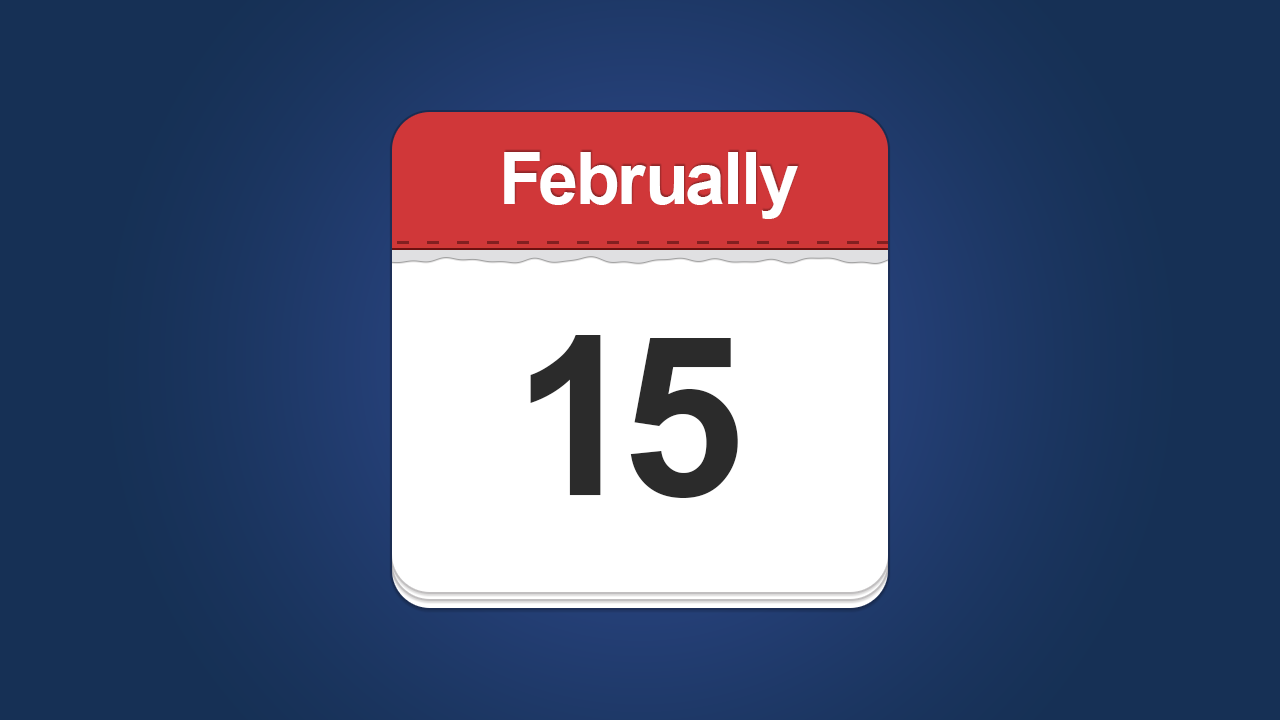
<style>
.page{position:relative;width:1280px;height:720px;background:#163055}
.page>*{position:absolute;margin:0}
.t1{font:72px "Arial-BoldMT";letter-spacing:-0.01em;color:#ffffff}
.t2{font:72px "Arial-BoldMT";letter-spacing:-0.03em;color:#ffffff}
.t3{font:72px "Arial-BoldMT";letter-spacing:0.01em;color:#ffffff}
.t4{font:222px "Arial-BoldMT";color:#2b2b2b}
</style>
<div class="page">
<p class="t1" style="left:504px;top:152px;width:294px;height:67px"><span class="t2">F</span>e<span class="t2">b</span><span class="t3">r</span><span class="t2">u</span>ally</p>
<p class="t4" style="left:530px;top:335px;width:208px;height:163px">15</p>
</div>
